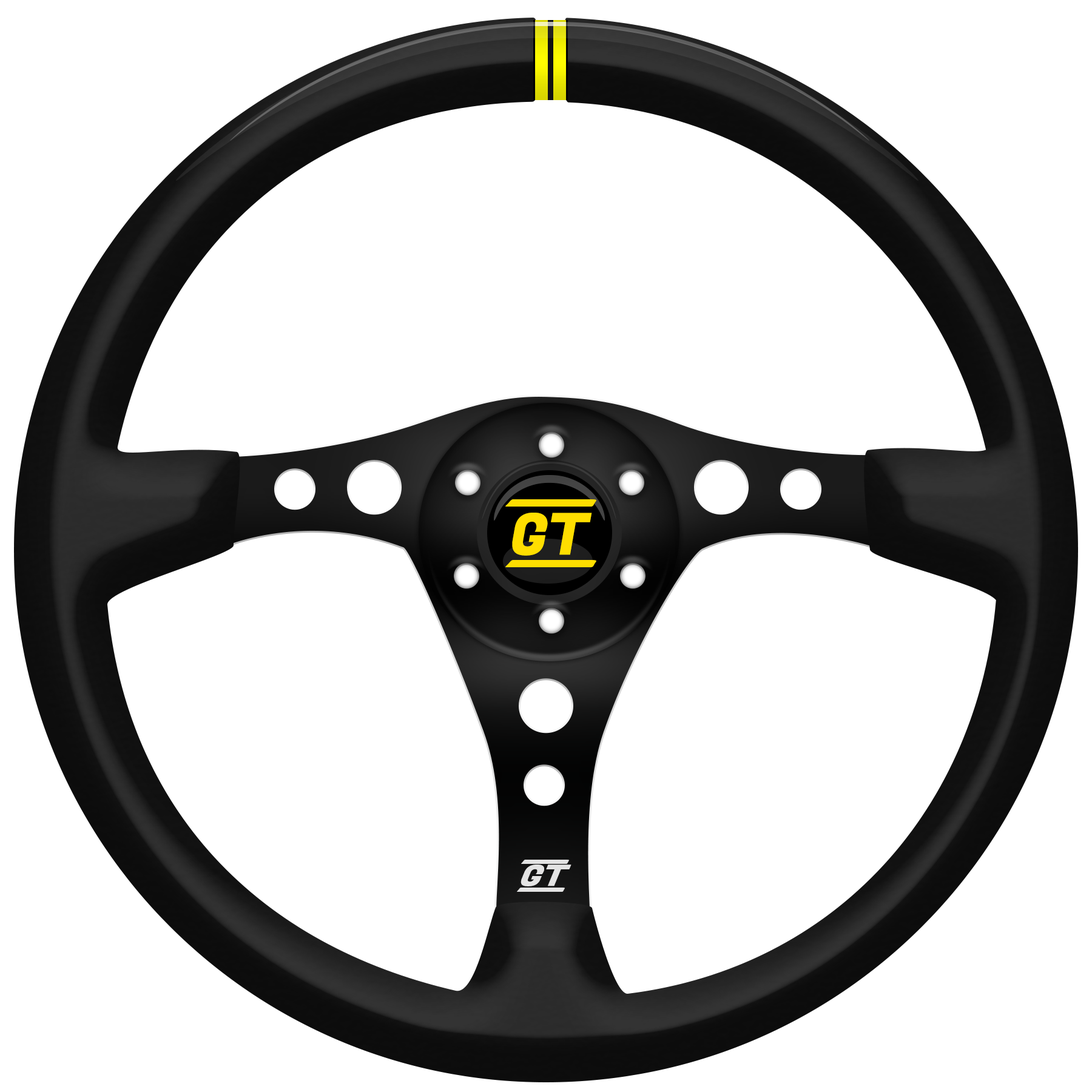
<style>
.page{position:relative;width:1092px;height:1092px;background:#ffffff}
.page>*{position:absolute;margin:0}
.t1{font:57.7px "FugazOne-Regular";color:#ffde00}
.t2{font:29.2px "FugazOne-Regular";color:#e3e3e3;font-style:italic;scale:1.16 1}
</style>
<div class="page">
<p class="t1" style="left:512px;top:513px;width:80px;height:43px">GT</p>
<p class="t2" style="left:521px;top:864px;width:50px;height:22px">GT</p>
</div>
